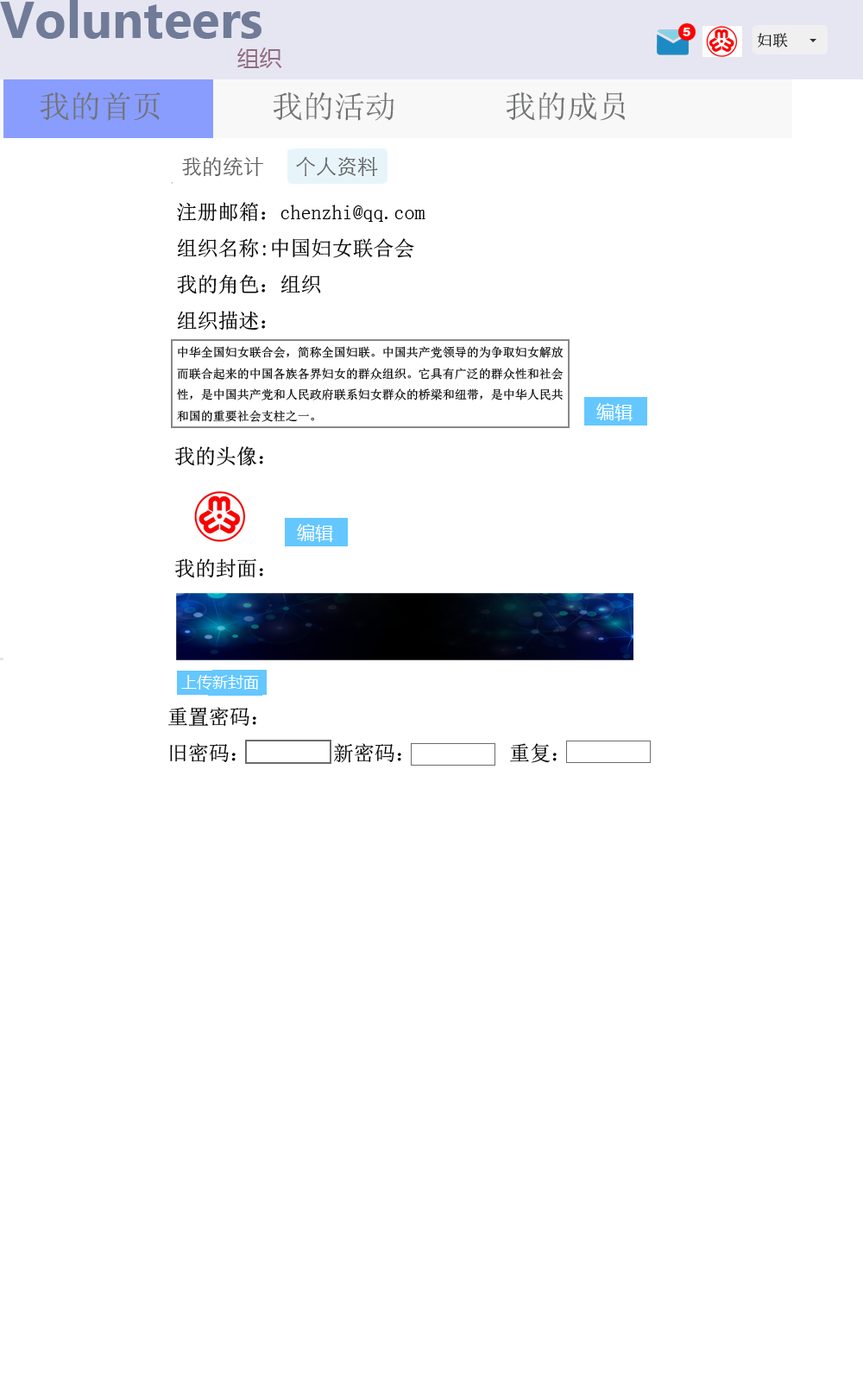
<style>
.page{position:relative;width:863px;height:1381px;background:#ffffff}
.page>*{position:absolute;margin:0}
.t1{font:12.1px "Arial-Black";color:#ffffff}
.t2{font:15.5px "SimSun";color:#141414}
.t3{font:22.4px "MicrosoftYaHei";color:#926c82}
.t4{font:31.1px "SimSun";color:#717273}
.t5{font:20.7px "STXihei";color:#626262}
.t6{font:12.1px "SimSun";color:#000000}
.t7{font:20.7px "SimSun";color:#000000}
.t8{font:15.5px "MicrosoftYaHei";color:#ffffff}
</style>
<div class="page">
<p class="t1" style="left:683px;top:28px;width:8px;height:8px">5</p>
<p class="t2" style="left:757px;top:33px;width:31px;height:14px">妇联</p>
<p class="t3" style="left:237px;top:47px;width:45px;height:21px">组织</p>
<p class="t4" style="left:40px;top:92px;width:585px;height:29px">我的首页       我的活动       我的成员</p>
<p class="t5" style="left:182px;top:156px;width:196px;height:21px">我的统计      个人资料</p>
<p class="t6" style="left:177px;top:202px;width:387px;height:220px"><span class="t7">注册邮箱：chenzhi@qq.com<br>组织名称:中国妇女联合会<br>我的角色：组织<br>组织描述：<br></span>中华全国妇女联合会，简称全国妇联。中国共产党领导的为争取妇女解放<br>而联合起来的中国各族各界妇女的群众组织。它具有广泛的群众性和社会<br>性，是中国共产党和人民政府联系妇女群众的桥梁和纽带，是中华人民共<br>和国的重要社会支柱之一。</p>
<p class="t7" style="left:175px;top:446px;width:88px;height:20px">我的头像：</p>
<p class="t7" style="left:175px;top:559px;width:88px;height:19px">我的封面：</p>
<p class="t8" style="left:181px;top:675px;width:78px;height:15px">上传新封面</p>
<p class="t7" style="left:168px;top:707px;width:389px;height:56px">重置密码：<br>旧密码：        新密码：         重复：</p>
</div>
